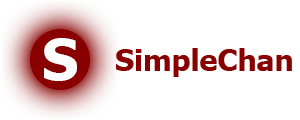
<style>
.page{position:relative;width:300px;height:120px;background:#ffffff}
.page>*{position:absolute;margin:0}
.t1{font:57px "Tahoma-Bold";color:#ffffff}
.t2{font:30px "Tahoma-Bold";color:#880000}
</style>
<div class="page">
<p class="t1" style="left:44px;top:38px;width:33px;height:43px">S</p>
<p class="t2" style="left:116px;top:48px;width:176px;height:29px">SimpleChan</p>
</div>
